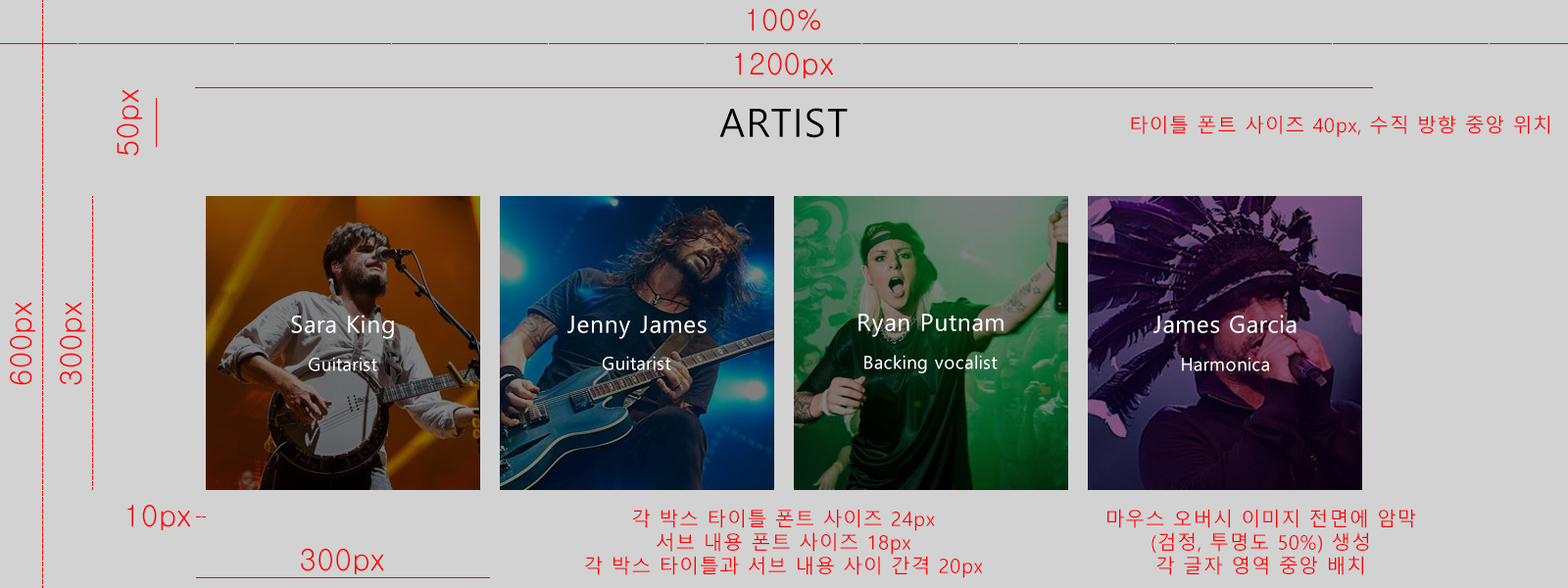
<style>
.page{position:relative;width:1568px;height:588px;background:#d2d2d2}
.page>*{position:absolute;margin:0}
.t1{font:29.4px "Gulim";letter-spacing:0.03em;color:#ff0000}
.t2{font:29.7px "Gulim";letter-spacing:0.03em;color:#ff0000}
.t3{font:39.2px "MalgunGothic";letter-spacing:0.03em;color:#000000}
.t4{font:19.6px "MalgunGothic";letter-spacing:0.03em;color:#ff0000}
.t5{font:23.5px "MalgunGothic";letter-spacing:0.03em;color:#ffffff}
.t6{font:17.6px "MalgunGothic";letter-spacing:0.03em;color:#ffffff}
.t7{font:29.3px "Gulim";letter-spacing:0.03em;color:#ff0000}
.t8{font:29.6px "Gulim";letter-spacing:0.03em;color:#ff0000}
</style>
<div class="page">
<p class="t1" style="left:748px;top:9px;width:72px;height:22px">100%</p>
<p class="t2" style="left:735px;top:52px;width:98px;height:27px">1200px</p>
<p class="t1" style="left:117px;top:89px;width:26px;height:67px;rotate:-90deg">50px</p>
<p class="t3" style="left:719px;top:108px;width:129px;height:30px">ARTIST</p>
<p class="t4" style="left:1131px;top:115px;width:418px;height:22px">타이틀 폰트 사이즈 40px, 수직 방향 중앙 위치</p>
<p class="t1" style="left:10px;top:302px;width:26px;height:83px;rotate:-90deg">600px</p>
<p class="t1" style="left:60px;top:302px;width:26px;height:83px;rotate:-90deg">300px</p>
<p class="t5" style="left:291px;top:315px;width:103px;height:24px">Sara King</p>
<p class="t5" style="left:567px;top:316px;width:140px;height:23px">Jenny James</p>
<p class="t5" style="left:858px;top:314px;width:146px;height:23px">Ryan Putnam</p>
<p class="t5" style="left:1153px;top:315px;width:144px;height:18px">James Garcia</p>
<p class="t6" style="left:309px;top:357px;width:68px;height:14px">Guitarist</p>
<p class="t6" style="left:603px;top:356px;width:68px;height:14px">Guitarist</p>
<p class="t6" style="left:864px;top:355px;width:134px;height:18px">Backing vocalist</p>
<p class="t6" style="left:1182px;top:357px;width:87px;height:14px">Harmonica</p>
<p class="t7" style="left:127px;top:505px;width:63px;height:26px">10px</p>
<p class="t4" style="left:585px;top:509px;width:398px;height:69px;text-align:center">각 박스 타이틀 폰트 사이즈 24px<br>서브 내용 폰트 사이즈 18px<br>각 박스 타이틀과 서브 내용 사이 간격 20px</p>
<p class="t4" style="left:1107px;top:509px;width:309px;height:66px;text-align:center">마우스 오버시 이미지 전면에 암막<br>(검정, 투명도 50%) 생성<br>각 글자 영역 중앙 배치</p>
<p class="t8" style="left:301px;top:548px;width:83px;height:27px">300px</p>
</div>
